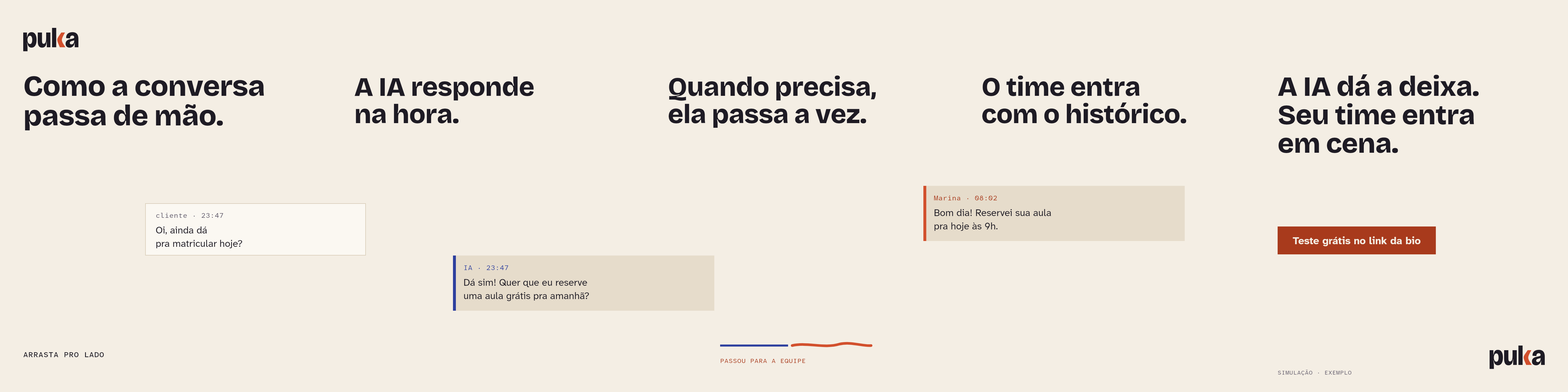
<style>
.page{position:relative;width:1568px;height:392px;background:#f4eee4}
.page>*{position:absolute;margin:0}
.t1{font:29px/29.6px "BricolageGrotesque-ExtraBold";letter-spacing:-0.012em;color:#1e1b24}
.t2{font:26.7px/27.3px "BricolageGrotesque-ExtraBold";letter-spacing:-0.012em;color:#1e1b24}
.t3{font:27.9px/28.5px "BricolageGrotesque-ExtraBold";letter-spacing:-0.012em;color:#1e1b24}
.t4{font:7px "AtkinsonHyperlegibleMono-Regular";letter-spacing:0.02em;color:#a83a1c}
.t5{font:9.9px/13.4px "AtkinsonHyperlegibleNext-Regular";color:#1e1b24}
.t6{font:7px "AtkinsonHyperlegibleMono-Regular";letter-spacing:0.02em;color:#5e5868}
.t7{font:10.5px "AtkinsonHyperlegibleNext-Bold";color:#f4eee4}
.t8{font:7px "AtkinsonHyperlegibleMono-Regular";letter-spacing:0.02em;color:#2d3f9e}
.t9{font:7.5px "AtkinsonHyperlegibleMono-Medium";letter-spacing:0.04em;color:#1e1b24}
.t10{font:6.4px "AtkinsonHyperlegibleMono-Regular";letter-spacing:0.04em;color:#a83a1c}
.t11{font:5.8px "AtkinsonHyperlegibleMono-Regular";letter-spacing:0.04em;color:#5e5868}
</style>
<div class="page">
<p class="t1" style="left:24px;top:76px;width:240px;height:54px">Como a conversa<br>passa de mão.</p>
<p class="t2" style="left:355px;top:76px;width:179px;height:47px">A IA responde<br>na hora.</p>
<p class="t2" style="left:668px;top:75px;width:208px;height:53px">Quando precisa,<br>ela passa a vez.</p>
<p class="t2" style="left:982px;top:75px;width:204px;height:48px">O time entra<br>com o histórico.</p>
<p class="t3" style="left:1278px;top:74px;width:201px;height:79px">A IA dá a deixa.<br>Seu time entra<br>em cena.</p>
<p class="t4" style="left:934px;top:195px;width:63px;height:5px">Marina · 08:02</p>
<p class="t5" style="left:934px;top:209px;width:117px;height:22px">Bom dia! Reservei sua aula<br>pra hoje às 9h.</p>
<p class="t6" style="left:156px;top:213px;width:67px;height:5px">cliente · 23:47</p>
<p class="t5" style="left:156px;top:226px;width:86px;height:22px">Oi, ainda dá<br>pra matricular hoje?</p>
<p class="t7" style="left:1293px;top:236px;width:127px;height:10px">Teste grátis no link da bio</p>
<p class="t8" style="left:464px;top:265px;width:44px;height:5px">IA · 23:47</p>
<p class="t5" style="left:464px;top:279px;width:125px;height:22px">Dá sim! Quer que eu reserve<br>uma aula grátis pra amanhã?</p>
<p class="t9" style="left:23px;top:352px;width:81px;height:5px">ARRASTA PRO LADO</p>
<p class="t10" style="left:721px;top:359px;width:84px;height:4px">PASSOU PARA A EQUIPE</p>
<p class="t11" style="left:1278px;top:370px;width:73px;height:5px">SIMULAÇÃO · EXEMPLO</p>
</div>
